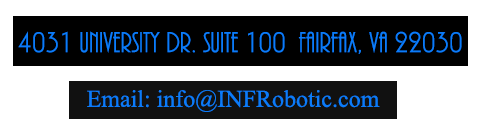
<style>
.page{position:relative;width:488px;height:140px;background:#ffffff}
.page>*{position:absolute;margin:0}
.t1{font:30px "ARBONNIE";color:#0b7bf9}
.t2{font:24px "TimesNewRomanPSMT";color:#0b7bf9}
</style>
<div class="page">
<p class="t1" style="left:18px;top:31px;width:444px;height:23px">4031 University Dr. Suite 100  Fairfax, VA 22030</p>
<p class="t2" style="left:87px;top:90px;width:293px;height:22px;text-align:center">Email: info@INFRobotic.com<br><br>s.com</p>
</div>
